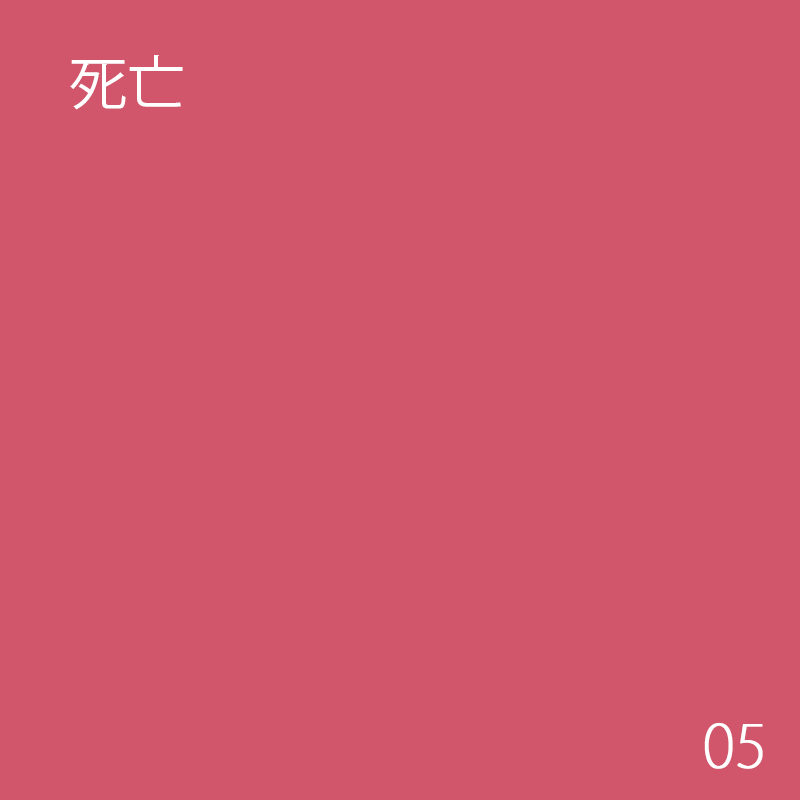
<style>
.page{position:relative;width:800px;height:800px;background:#d2566b}
.page>*{position:absolute;margin:0}
.t1{font:58.3px "KozGoPr6N-Regular";color:#ffffff}
.t2{font:58.3px "KozGoPr6N-ExtraLight";color:#ffffff;font-weight:bold}
.t3{font:58.3px "KozGoPr6N-Regular"}
</style>
<div class="page">
<p class="t1" style="left:70px;top:54px;width:113px;height:56px">死亡</p>
<p class="t1" style="left:70px;top:54px;width:113px;height:56px">死亡</p>
<p class="t1" style="left:70px;top:54px;width:113px;height:56px">死亡</p>
<p class="t1" style="left:70px;top:54px;width:113px;height:56px">死亡</p>
<p class="t1" style="left:70px;top:54px;width:113px;height:56px">死亡</p>
<p class="t1" style="left:70px;top:54px;width:113px;height:56px">死亡</p>
<p class="t2" style="left:704px;top:722px;width:59px;height:47px">05</p>
<p class="t3" style="left:705px;top:726px;width:50px;height:45px">01</p>
</div>
